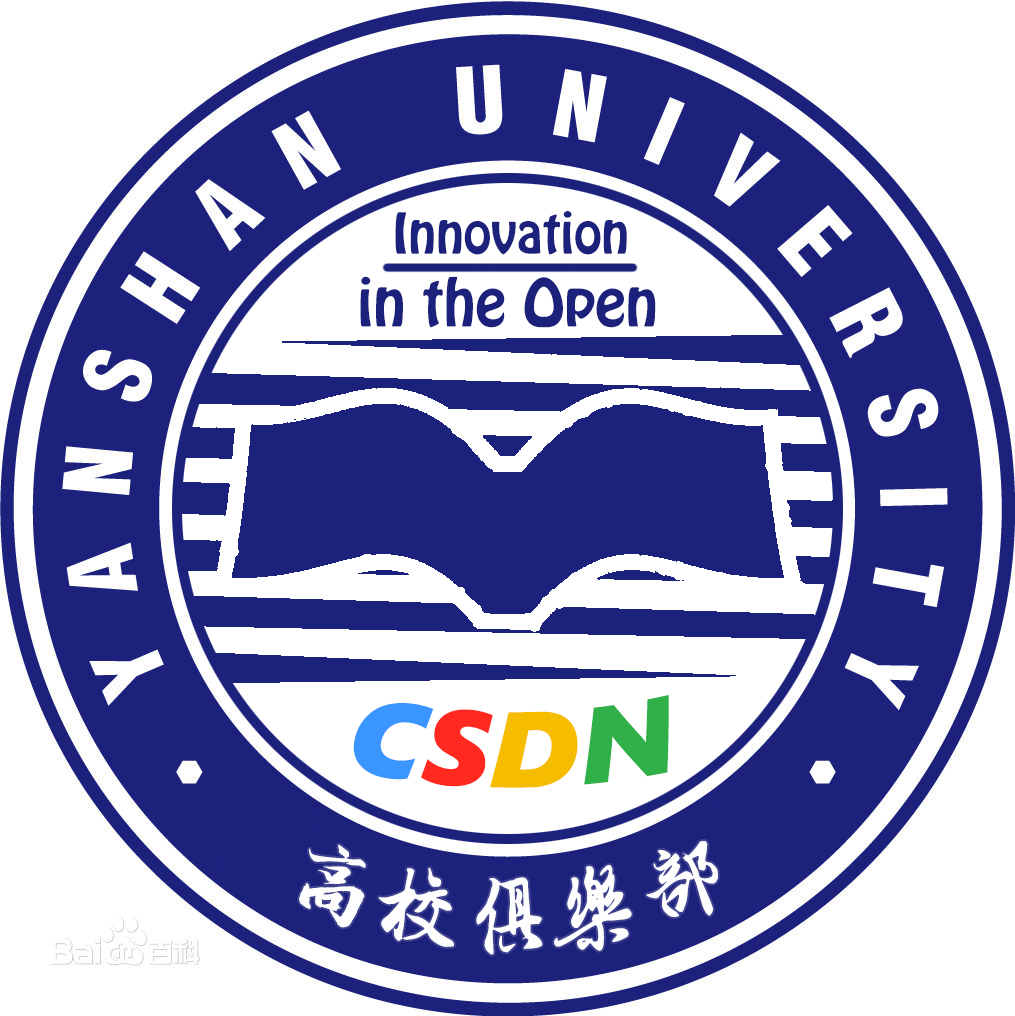
<style>
.page{position:relative;width:1015px;height:1016px;background:#ffffff}
.page>*{position:absolute;margin:0}
.t1{font:50px "HoboStd";color:#1c217c}
.t2{font:58.3px "HoboStd";color:#1c217c}
.t3{font:107.6px "SegoeUIBlack-Italic";color:#3a95ff}
.t4{font:107.6px "SegoeUIBlack-Italic";color:#ff291f}
.t5{font:107.6px "SegoeUIBlack-Italic";color:#f6bc00}
.t6{font:107.6px "SegoeUIBlack-Italic";color:#2fb049}
.t7{font:91.5px "SCFwxz";color:#fefefe;scale:0.88 1}
</style>
<div class="page">
<p class="t1" style="left:395px;top:211px;width:232px;height:44px">Innovation</p>
<p class="t2" style="left:360px;top:276px;width:296px;height:52px">in the Open</p>
<p class="t3" style="left:353px;top:695px;width:316px;height:93px">C<span class="t4">S</span><span class="t5">D</span><span class="t6">N</span></p>
<p class="t7" style="left:299px;top:841px;width:419px;height:114px">高校俱乐部</p>
</div>
